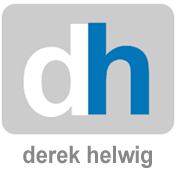
<style>
.page{position:relative;width:176px;height:176px;background:#cccccc}
.page>*{position:absolute;margin:0}
.t1{font:24px "Arial-BoldMT";color:#888888;scale:0.9 1}
</style>
<div class="page">
<p class="t1" style="left:23px;top:145px;width:129px;height:23px">derek helwig</p>
</div>
